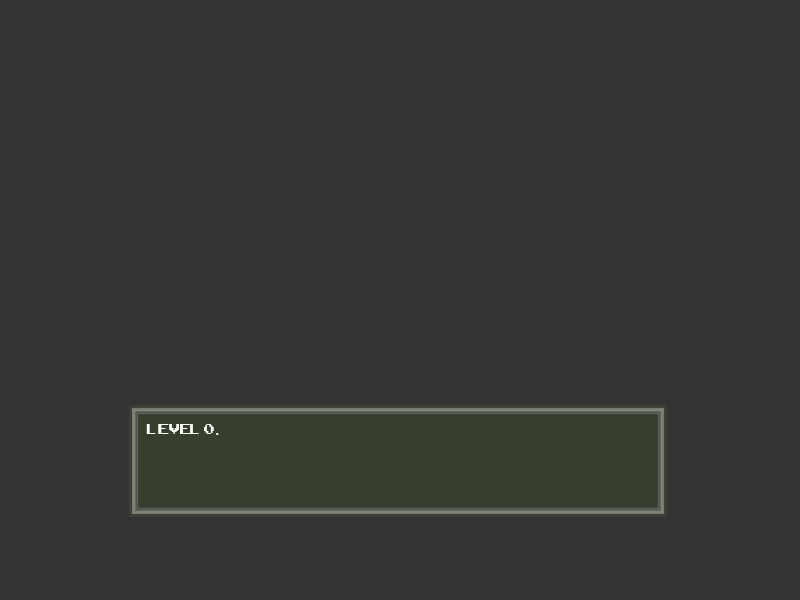
<style>
.page{position:relative;width:800px;height:600px;background:#333333}
.page>*{position:absolute;margin:0}
.t1{font:19.6px "ArcadeClassic";color:#fafdf5}
.t2{font:19.6px "TimesNewRomanPSMT";color:#fafdf5}
</style>
<div class="page">
<p class="t1" style="left:146px;top:424px;width:73px;height:11px">Level 0<span class="t2">.</span></p>
</div>
